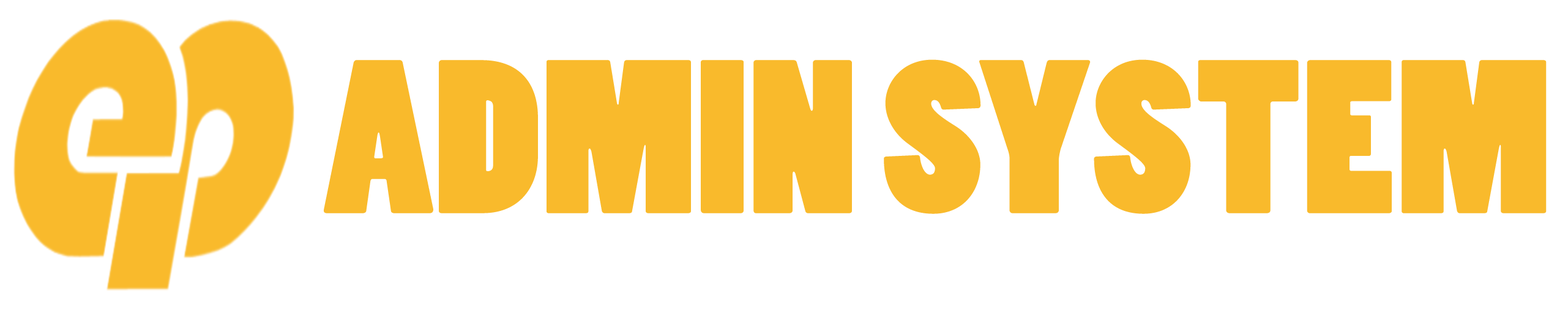
<style>
.page{position:relative;width:1568px;height:313px;background:#ffffff}
.page>*{position:absolute;margin:0}
.t1{font:204.1px "PoplarStd";letter-spacing:0.005em;color:#f9ba2c;scale:1.09 1}
</style>
<div class="page">
<p class="t1" style="left:324px;top:59px;width:1223px;height:155px">ADMIN SYSTEM</p>
</div>
